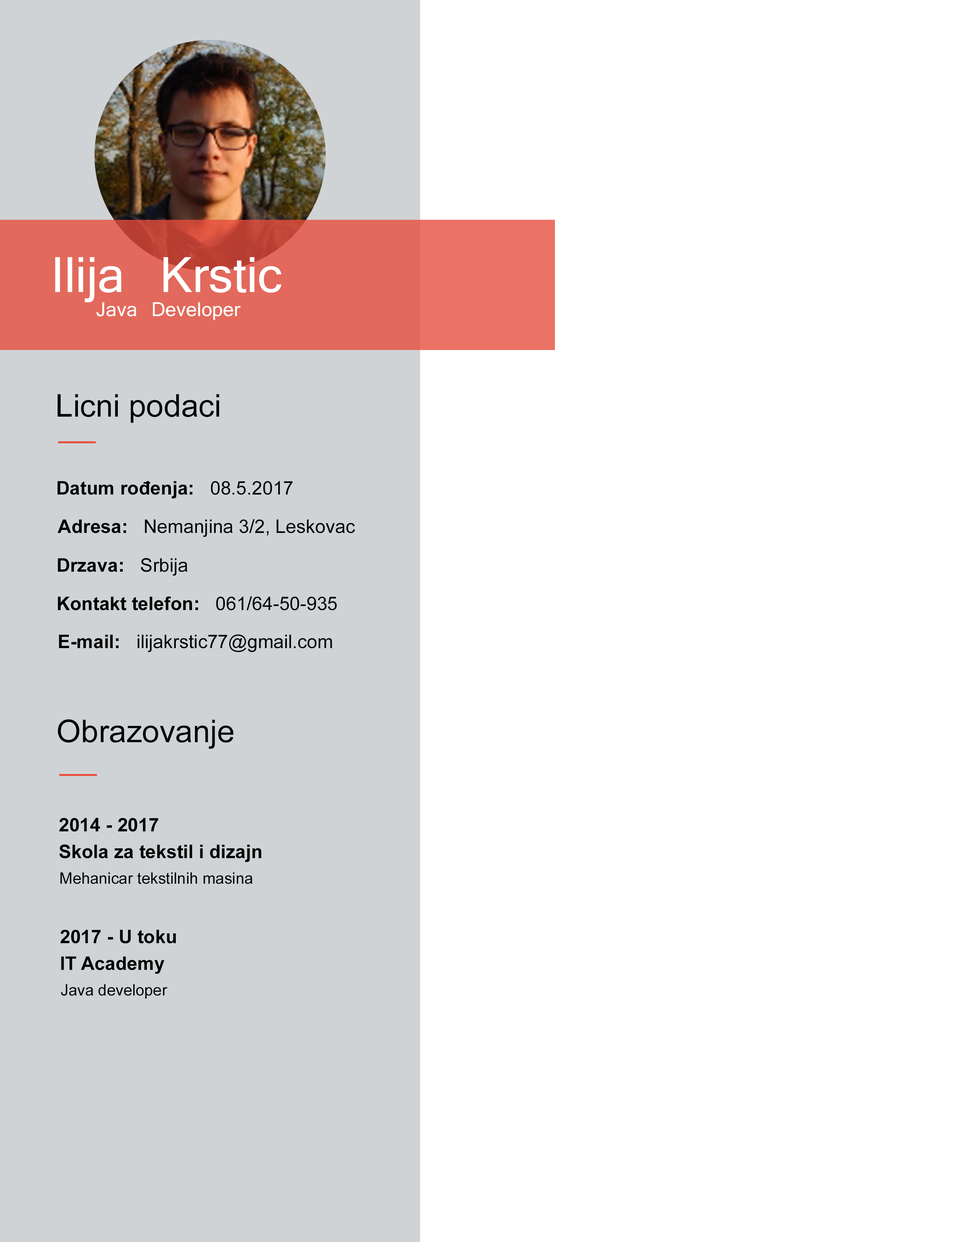
<style>
.page{position:relative;width:960px;height:1242px;background:#ffffff}
.page>*{position:absolute;margin:0}
.t1{font:47.1px "Kartika";color:#ffffff}
.t2{font:18.8px "Kartika";color:#ffffff}
.t3{font:31.4px "ArialMT";color:#000000}
.t4{font:31.5px "ArialMT";color:#e74c3c;scale:0.71 1}
.t5{font:18.8px "Arial-BoldMT";color:#000000}
.t6{font:18.8px "ArialMT";color:#000000}
.t7{font:4.5px "ArialMT";color:#000000}
.t8{font:4.5px "Arial-BoldMT";color:#000000}
.t9{font:15.7px "ArialMT";color:#000000}
</style>
<div class="page">
<p class="t1" style="left:55px;top:257px;width:226px;height:46px">Ilija Krstic</p>
<p class="t2" style="left:96px;top:302px;width:145px;height:18px">Java Developer</p>
<p class="t3" style="left:58px;top:394px;width:161px;height:29px">Licni podaci</p>
<p class="t4" style="left:58px;top:441px;width:38px;height:2px">___</p>
<p class="t5" style="left:57px;top:481px;width:236px;height:18px">Datum rođenja:   <span class="t6">08.5.2017</span></p>
<p class="t7" style="left:58px;top:519px;width:297px;height:18px"><span class="t8">Adresa:   </span>Nemanjina 3/2, Leskovac</p>
<p class="t8" style="left:58px;top:558px;width:129px;height:18px">Drzava:   <span class="t7">Srbija</span></p>
<p class="t8" style="left:58px;top:596px;width:279px;height:15px">Kontakt telefon:   <span class="t7">061/64-50-935</span></p>
<p class="t7" style="left:59px;top:634px;width:273px;height:18px"><span class="t8">E-mail:   </span>ilijakrstic77@gmail.com</p>
<p class="t3" style="left:58px;top:719px;width:175px;height:30px">Obrazovanje</p>
<p class="t4" style="left:59px;top:774px;width:38px;height:2px">___</p>
<p class="t8" style="left:59px;top:818px;width:99px;height:14px">2014 - 2017</p>
<p class="t5" style="left:59px;top:844px;width:202px;height:18px">Skola za tekstil i dizajn</p>
<p class="t9" style="left:60px;top:873px;width:193px;height:11px">Mehanicar tekstilnih masina</p>
<p class="t8" style="left:60px;top:930px;width:116px;height:14px">2017 - U toku</p>
<p class="t5" style="left:61px;top:957px;width:104px;height:17px">IT Academy</p>
<p class="t9" style="left:61px;top:984px;width:107px;height:15px">Java developer</p>
</div>
